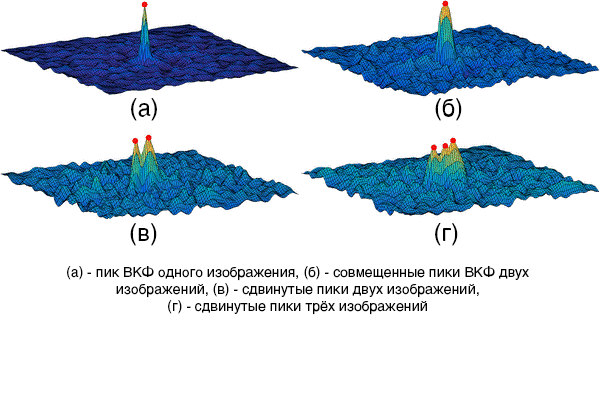
<style>
.page{position:relative;width:600px;height:400px;background:#ffffff}
.page>*{position:absolute;margin:0}
.t1{font:24px "Helvetica-Regular";color:#000000}
.t2{font:23.9px "Helvetica-Regular";color:#000000}
.t3{font:14px "Helvetica-Regular";color:#000000}
</style>
<div class="page">
<p class="t1" style="left:131px;top:98px;width:26px;height:23px">(а)</p>
<p class="t2" style="left:435px;top:98px;width:27px;height:23px">(б)</p>
<p class="t2" style="left:130px;top:223px;width:27px;height:23px">(в)</p>
<p class="t2" style="left:435px;top:223px;width:23px;height:23px">(г)</p>
<p class="t3" style="left:67px;top:266px;width:462px;height:49px;text-align:center">(а) - пик ВКФ одного изображения, (б) - совмещенные пики ВКФ двух изображений, (в) - сдвинутые пики двух изображений, <br>(г) - сдвинутые пики трёх изображений</p>
</div>
